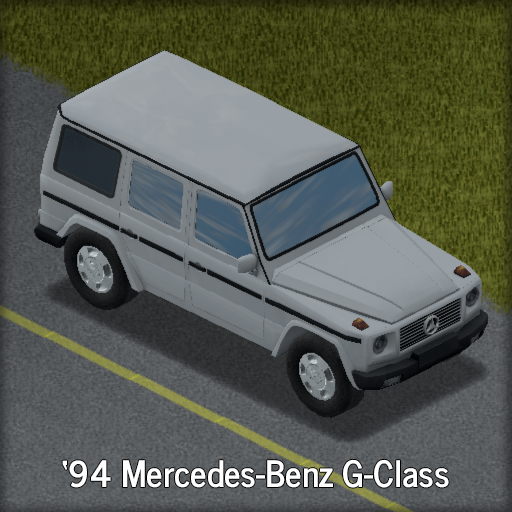
<style>
.page{position:relative;width:512px;height:512px}
.page>*{position:absolute;margin:0}
.t1{font:36px "NewsCycle-Bold";color:#ffffff}
</style>
<div class="page">
<p class="t1" style="left:62px;top:459px;width:387px;height:29px">‘94 Mercedes-Benz G-Class</p>
</div>
